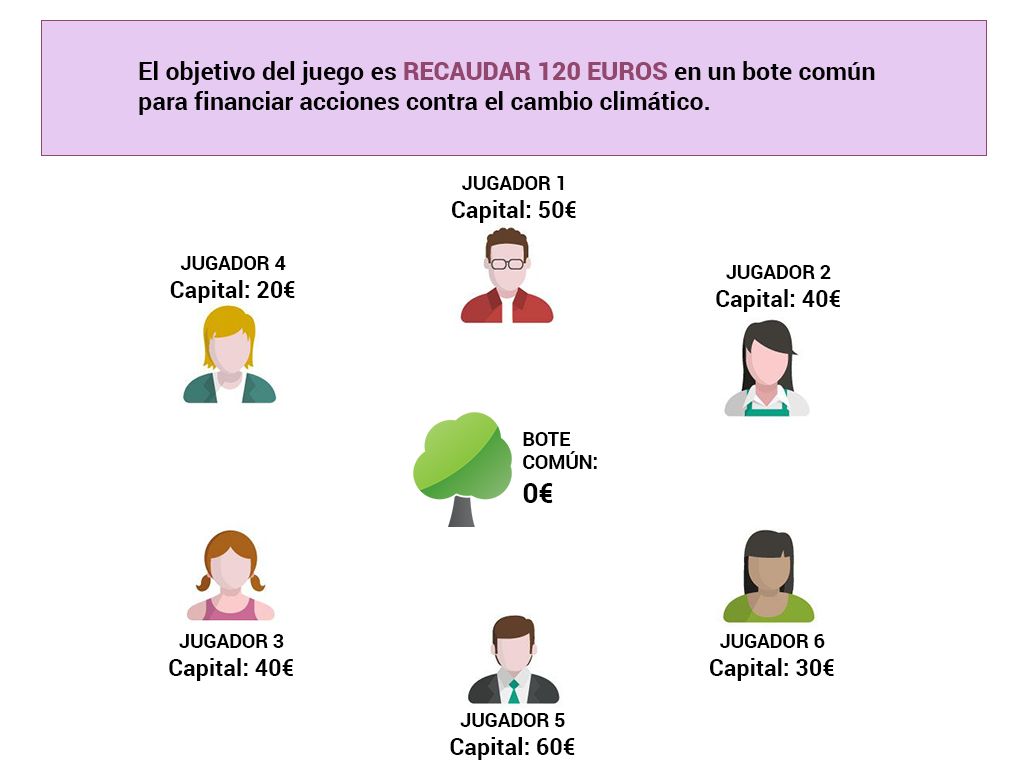
<style>
.page{position:relative;width:1024px;height:768px;background:#ffffff}
.page>*{position:absolute;margin:0}
.t1{font:25px "Roboto-Bold";color:#000000}
.t2{font:25px "Roboto-Black";color:#92476e}
.t3{font:23.4px "Roboto-Bold";color:#000000}
.t4{font:19.5px "Roboto-Bold";color:#000000}
.t5{font:28.1px "Roboto-Bold";color:#000000}
</style>
<div class="page">
<p class="t1" style="left:139px;top:61px;width:736px;height:54px">El objetivo del juego es <span class="t2">RECAUDAR 120 EUROS</span> en un bote común <br>para financiar acciones contra el cambio climático.</p>
<p class="t3" style="left:452px;top:176px;width:124px;height:47px;text-align:center"><span class="t4">JUGADOR 1<br></span>Capital: 50€</p>
<p class="t3" style="left:170px;top:256px;width:125px;height:47px;text-align:center"><span class="t4">JUGADOR 4<br></span>Capital: 20€</p>
<p class="t3" style="left:716px;top:265px;width:124px;height:47px;text-align:center"><span class="t4">JUGADOR 2<br></span>Capital: 40€</p>
<p class="t4" style="left:523px;top:432px;width:74px;height:71px">BOTE <br>COMÚN:<br><span class="t5">0€</span></p>
<p class="t3" style="left:169px;top:634px;width:124px;height:47px;text-align:center"><span class="t4">JUGADOR 3<br></span>Capital: 40€</p>
<p class="t3" style="left:710px;top:634px;width:124px;height:47px;text-align:center"><span class="t4">JUGADOR 6<br></span>Capital: 30€</p>
<p class="t3" style="left:450px;top:713px;width:125px;height:47px;text-align:center"><span class="t4">JUGADOR 5<br></span>Capital: 60€</p>
</div>
